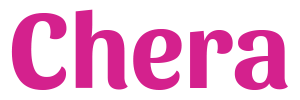
<style>
.page{position:relative;width:300px;height:100px;background:#ffffff}
.page>*{position:absolute;margin:0}
.t1{font:108.3px "Sansita-Bold";color:#d4218d}
</style>
<div class="page">
<p class="t1" style="left:11px;top:9px;width:277px;height:81px">Chera</p>
</div>
